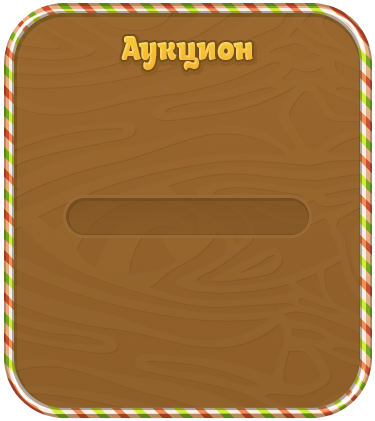
<style>
.page{position:relative;width:375px;height:421px}
.page>*{position:absolute;margin:0}
.t1{font:34.1px "ALSMalina";color:#f6c735;scale:0.78 1}
</style>
<div class="page">
<p class="t1" style="left:121px;top:36px;width:132px;height:34px">Аукцион</p>
</div>
